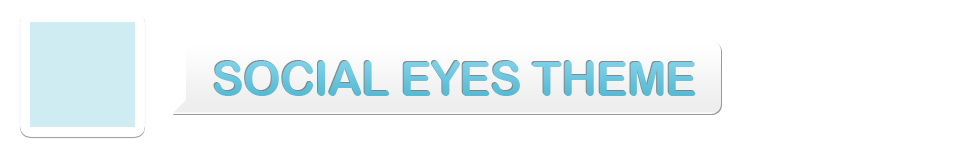
<style>
.page{position:relative;width:960px;height:150px;background:#ffffff}
.page>*{position:absolute;margin:0}
.t1{font:48px "ArialRoundedMTBold";letter-spacing:-0.025em;color:#7dd0e7;text-transform:uppercase}
</style>
<div class="page">
<p class="t1" style="left:214px;top:61px;width:482px;height:35px">Social Eyes Theme</p>
</div>
